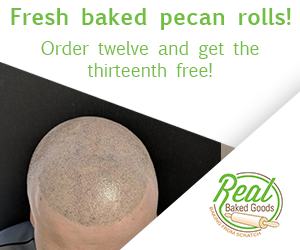
<style>
.page{position:relative;width:300px;height:250px;background:#ffffff}
.page>*{position:absolute;margin:0}
.t1{font:22px "EuphemiaUCAS-Bold";color:#71be40}
.t2{font:18px "EuphemiaUCAS";color:#71be40}
</style>
<div class="page">
<p class="t1" style="left:11px;top:8px;width:280px;height:22px">Fresh baked pecan rolls!</p>
<p class="t2" style="left:41px;top:41px;width:218px;height:36px;text-align:center">Order twelve and get the<br>thirteenth free!</p>
</div>
